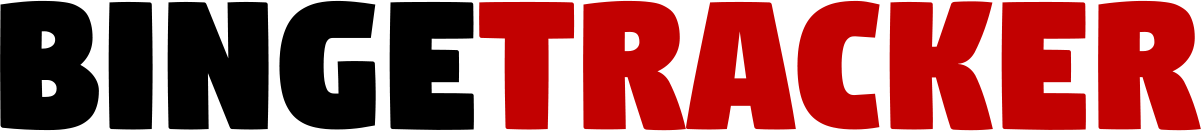
<style>
.page{position:relative;width:1201px;height:131px;background:#c20101}
.page>*{position:absolute;margin:0}
.t1{font:216px "Digitalt";color:#c20101}
.t2{font:216px "Digitalt";color:#000000}
</style>
<div class="page">
<p class="t1" style="left:0px;top:0px;width:1201px;height:131px"><span class="t2">Binge</span>Tracker</p>
</div>
